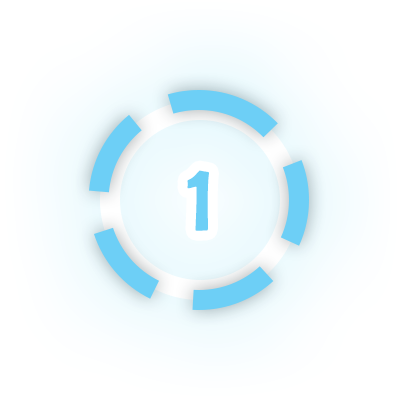
<style>
.page{position:relative;width:400px;height:400px;background:#ffffff}
.page>*{position:absolute;margin:0}
.t1{font:100px "BerlinSansFB-Reg";color:#6dcff6}
</style>
<div class="page">
<p class="t1" style="left:187px;top:170px;width:22px;height:61px">1</p>
</div>
